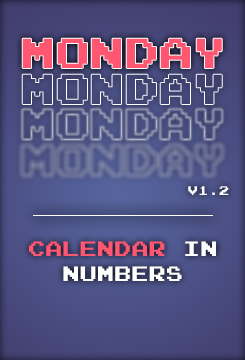
<style>
.page{position:relative;width:245px;height:360px}
.page>*{position:absolute;margin:0}
.t1{font:41.7px "JoystixMonospace-Regular";color:#ff5672}
.t2{font:41.7px "JoystixMonospace-Regular";color:#414573}
.t3{font:12.5px "JoystixMonospace-Regular";color:#ffffff}
.t4{font:20.8px "JoystixMonospace-Regular";color:#ffffff}
.t5{font:20.8px "JoystixMonospace-Regular";color:#ff5672}
</style>
<div class="page">
<p class="t1" style="left:22px;top:38px;width:200px;height:30px">Monday</p>
<p class="t2" style="left:22px;top:74px;width:200px;height:30px">Monday</p>
<p class="t3" style="left:188px;top:186px;width:41px;height:9px">v1.2</p>
<p class="t4" style="left:29px;top:241px;width:187px;height:40px;text-align:center"><span class="t5">Calendar </span>in numbers</p>
</div>
